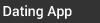
<style>
.page{position:relative;width:100px;height:23px;background:#333333}
.page>*{position:absolute;margin:0}
.t1{font:14px "Roboto-Medium";color:#ffffff}
</style>
<div class="page">
<p class="t1" style="left:3px;top:5px;width:69px;height:14px">Dating App</p>
</div>
